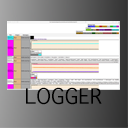
<style>
.page{position:relative;width:128px;height:128px}
.page>*{position:absolute;margin:0}
.t1{font:20px "Geneva";color:#000000}
</style>
<div class="page">
<p class="t1" style="left:26px;top:87px;width:76px;height:18px">LOGGER</p>
</div>
